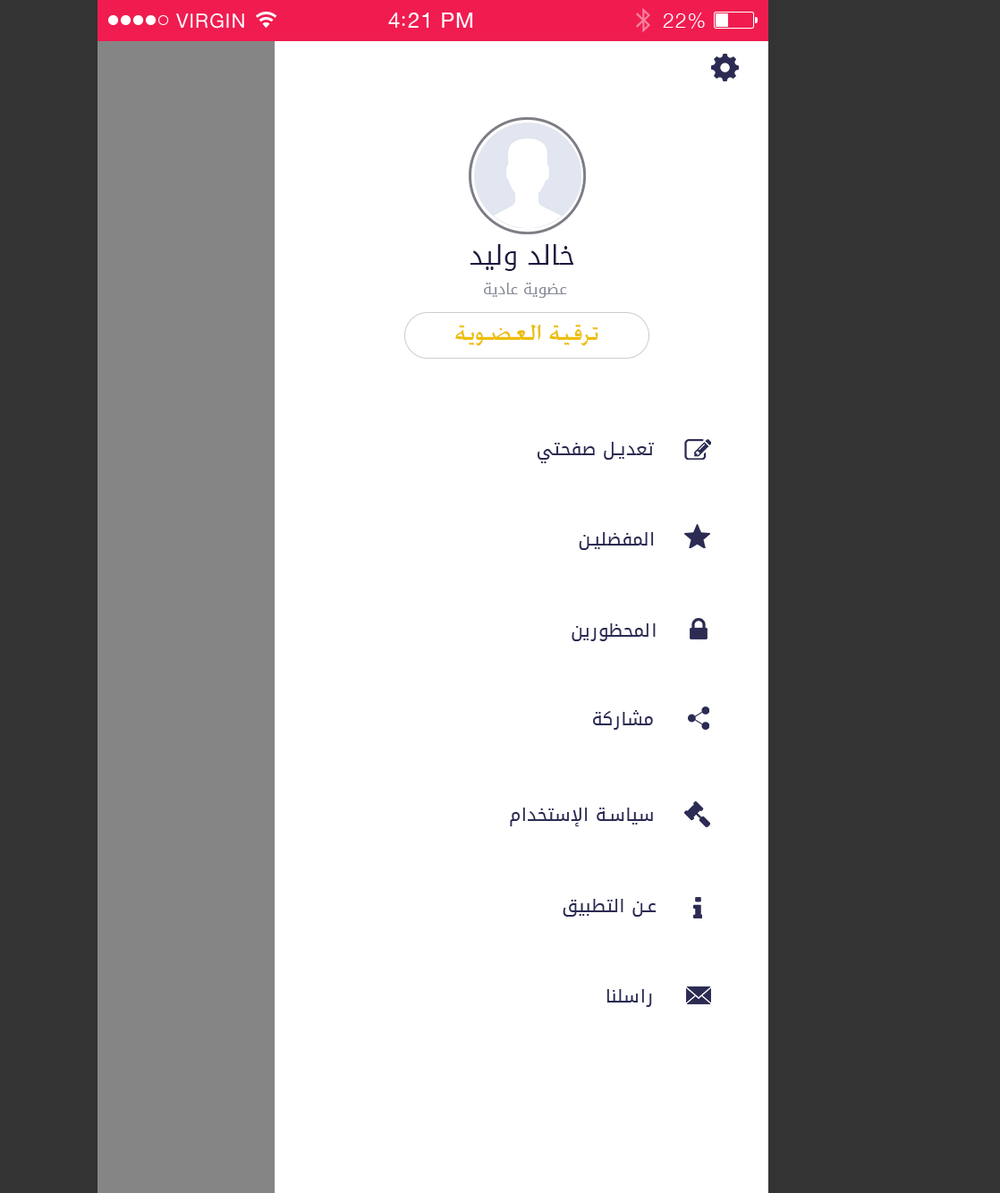
<style>
.page{position:relative;width:1000px;height:1193px;background:#ffffff}
.page>*{position:absolute;margin:0}
.t1{font:26.8px "DroidArabicKufi";color:#1f163e}
.t2{font:15.2px "DroidArabicKufi";color:#898d9a}
.t3{font:26.8px "AdvertisingMedium";color:#edbe00;text-transform:uppercase}
.t4{font:17.9px "DroidArabicKufi";letter-spacing:0.029em;color:#2b2b53}
</style>
<div class="page">
<p class="t1" style="left:469px;top:244px;width:104px;height:27px">خالد وليد</p>
<p class="t2" style="left:484px;top:283px;width:83px;height:15px">عضوية عادية</p>
<p class="t3" style="left:455px;top:324px;width:143px;height:22px">ترقية العضوية</p>
<p class="t4" style="left:536px;top:442px;width:118px;height:21px">تعديل صفحتي</p>
<p class="t4" style="left:579px;top:532px;width:75px;height:18px">المفضلين</p>
<p class="t4" style="left:571px;top:623px;width:84px;height:18px">المحظورين</p>
<p class="t4" style="left:593px;top:710px;width:60px;height:20px">مشاركة</p>
<p class="t4" style="left:510px;top:807px;width:143px;height:19px">سياسة الإستخدام</p>
<p class="t4" style="left:562px;top:899px;width:94px;height:18px">عن التطبيق</p>
<p class="t4" style="left:606px;top:989px;width:46px;height:18px">راسلنا</p>
</div>
